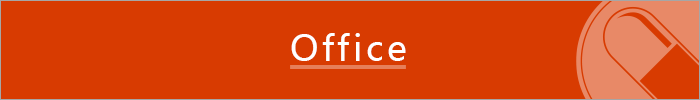
<style>
.page{position:relative;width:700px;height:100px;background:#d83b01}
.page>*{position:absolute;margin:0}
.t1{font:34.8px "MicrosoftYaHei";letter-spacing:0.1em;color:#ffffff}
</style>
<div class="page">
<p class="t1" style="left:291px;top:33px;width:115px;height:28px">Office</p>
</div>
